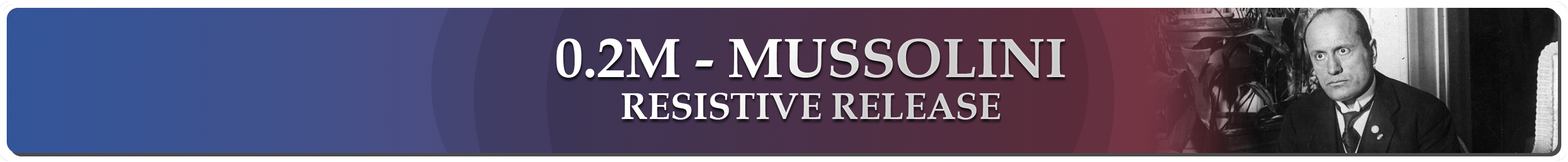
<style>
.page{position:relative;width:1568px;height:162px}
.page>*{position:absolute;margin:0}
.t1{font:37.3px/42px "BookAntiqua-Bold"}
.t2{font:56px "BookAntiqua-Bold"}
</style>
<div class="page">
<p class="t1" style="left:556px;top:39px;width:509px;height:81px;text-align:center"><span class="t2">0.2M - MUSSOLINI<br></span>RESISTIVE RELEASE</p>
</div>
